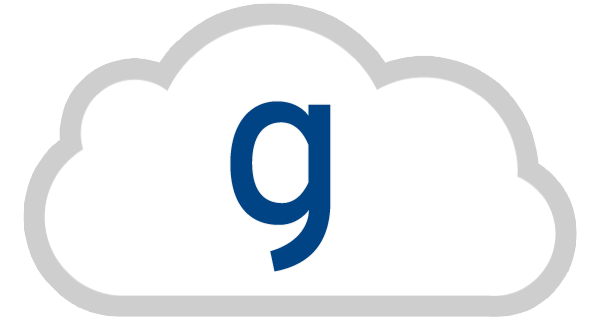
<style>
.page{position:relative;width:600px;height:320px;background:#ffffff}
.page>*{position:absolute;margin:0}
.t1{font:230px "ExpresswayRg-Regular";color:#004486}
</style>
<div class="page">
<p class="t1" style="left:230px;top:101px;width:101px;height:171px">g</p>
</div>
